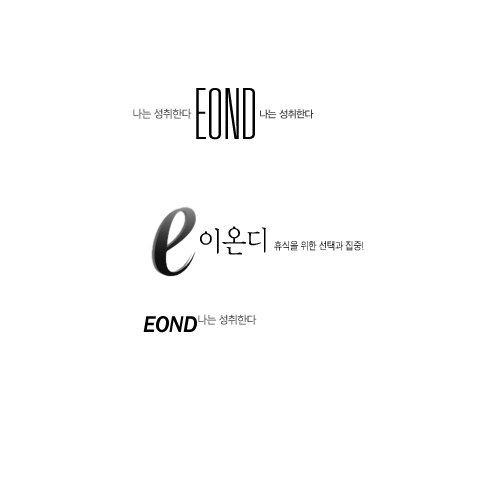
<style>
.page{position:relative;width:500px;height:500px;background:#ffffff}
.page>*{position:absolute;margin:0}
.t1{font:70.6px "Univethiultcon";color:#000000;scale:0.97 1}
.t2{font:10.8px "MalgunGothicRegular";letter-spacing:-0.1em;scale:0.97 1}
.t3{font:10px "YDIYGO330";letter-spacing:-0.05em;color:#454545}
.t4{font:23.5px "FranklinGothic-MediumItalic";letter-spacing:-0.025em;color:#000000;scale:0.97 1}
</style>
<div class="page">
<p class="t1" style="left:196px;top:88px;width:59px;height:52px">EOND</p>
<p class="t2" style="left:133px;top:108px;width:59px;height:11px">나는 성취한다</p>
<p class="t3" style="left:260px;top:109px;width:54px;height:10px">나는 성취한다</p>
<p class="t4" style="left:143px;top:316px;width:54px;height:17px">EOND</p>
<p class="t2" style="left:198px;top:314px;width:59px;height:11px">나는 성취한다</p>
</div>
